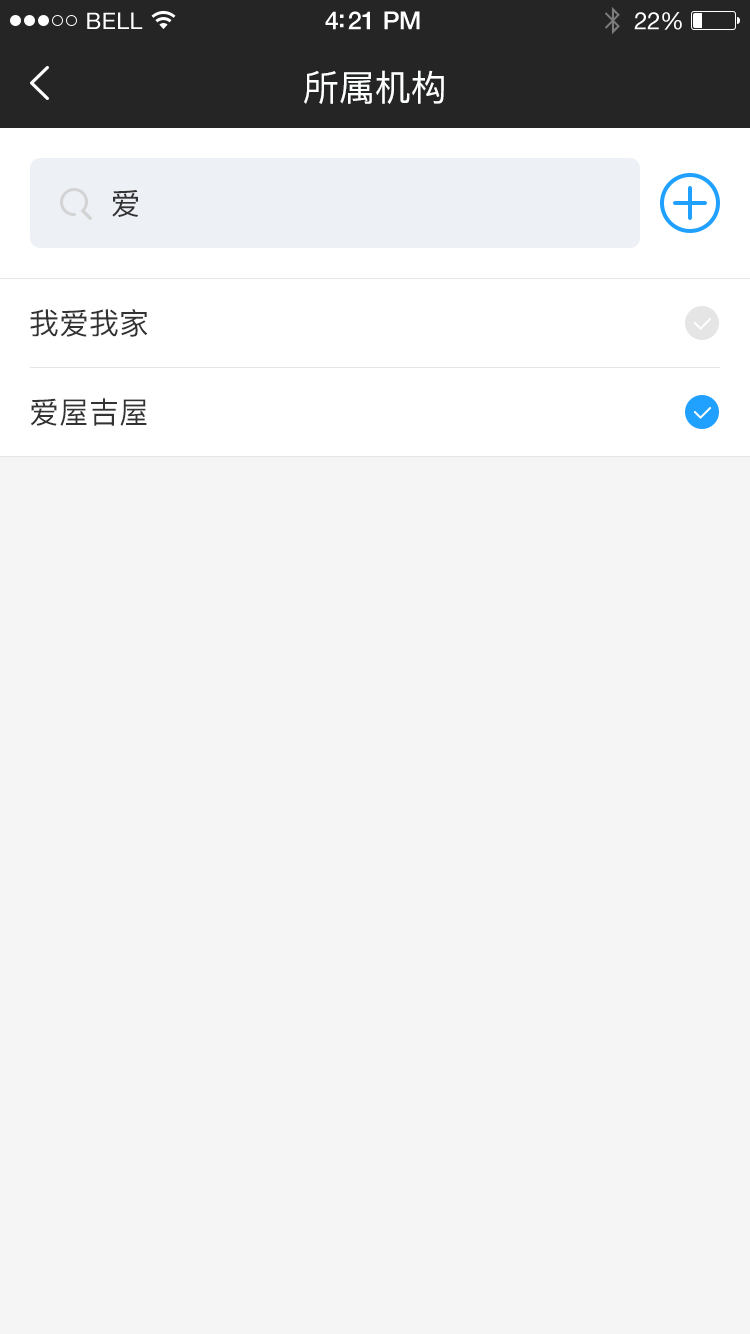
<style>
.page{position:relative;width:750px;height:1334px;background:#f5f5f5}
.page>*{position:absolute;margin:0}
.t1{font:23px "HelveticaNeue";letter-spacing:0.02em;color:#ffffff}
.t2{font:25px "HelveticaNeue-Medium";letter-spacing:-0.02em;color:#ffffff}
.t3{font:24px "HelveticaNeue";letter-spacing:-0.02em;color:#ffffff}
.t4{font:36px "PingFang-SC-Medium";color:#feffff}
.t5{font:30px "PingFang-SC-Medium";color:#333333}
</style>
<div class="page">
<p class="t1" style="left:87px;top:12px;width:56px;height:17px">BELL</p>
<p class="t2" style="left:325px;top:11px;width:95px;height:19px">4:21 PM</p>
<p class="t3" style="left:634px;top:12px;width:48px;height:18px">22%</p>
<p class="t4" style="left:304px;top:70px;width:140px;height:34px">所属机构</p>
<p class="t5" style="left:112px;top:190px;width:26px;height:27px">爱</p>
<p class="t5" style="left:30px;top:309px;width:118px;height:28px">我爱我家</p>
<p class="t5" style="left:31px;top:398px;width:116px;height:28px">爱屋吉屋</p>
</div>
